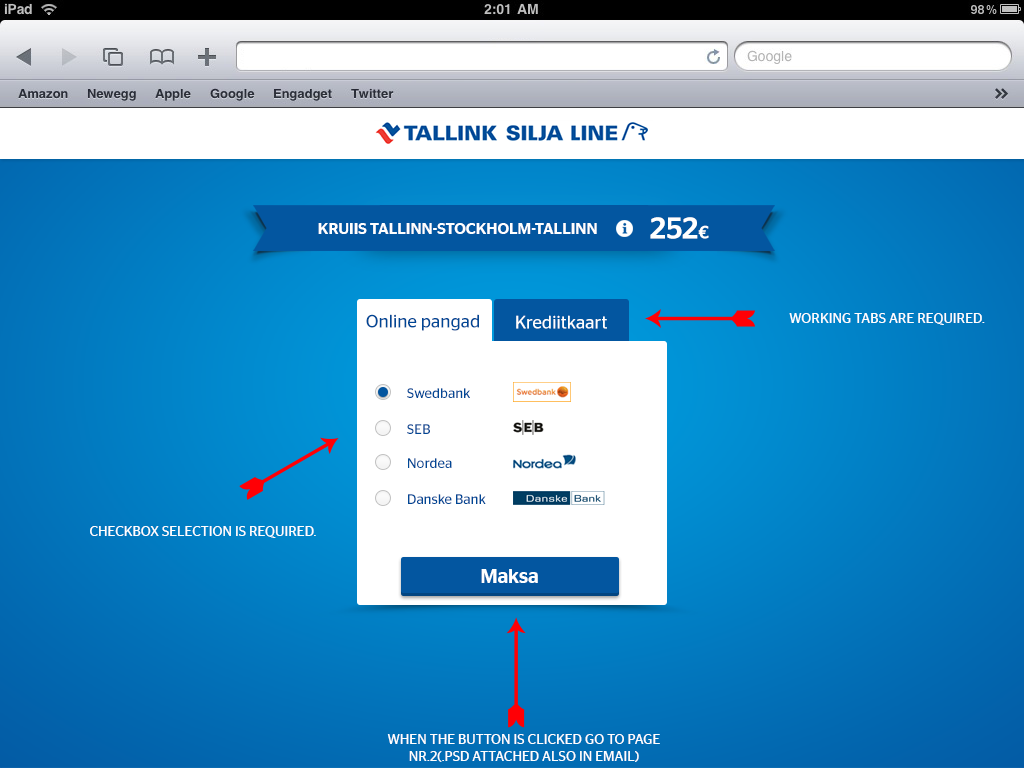
<style>
.page{position:relative;width:1024px;height:768px}
.page>*{position:absolute;margin:0}
.t1{font:30px "StagSans-Medium";color:#ffffff}
.t2{font:18px "StagSans-Medium";color:#ffffff}
.t3{font:16px "StagSans-Medium";color:#ffffff}
.t4{font:18px "StagSans-Book";color:#004795}
.t5{font:18px "StagSans-Book";color:#ffffff}
.t6{font:14px "StagSans-Book";color:#ffffff;text-transform:uppercase}
.t7{font:14px "StagSans-Book";color:#004795}
.t8{font:20px "StagSans-Medium";color:#feffff}
</style>
<div class="page">
<p class="t1" style="left:650px;top:217px;width:59px;height:22px">252<span class="t2">€</span></p>
<p class="t3" style="left:318px;top:223px;width:279px;height:11px">KRUIIS TALLINN-STOCKHOLM-TALLINN</p>
<p class="t4" style="left:366px;top:314px;width:113px;height:17px">Online pangad</p>
<p class="t5" style="left:516px;top:315px;width:91px;height:14px">Krediitkaart</p>
<p class="t6" style="left:789px;top:313px;width:196px;height:12px">wORKING TABS ARE REQUIRED.</p>
<p class="t7" style="left:407px;top:388px;width:63px;height:10px">Swedbank</p>
<p class="t7" style="left:407px;top:424px;width:23px;height:10px">SEB</p>
<p class="t7" style="left:408px;top:458px;width:44px;height:10px">Nordea</p>
<p class="t7" style="left:408px;top:494px;width:78px;height:10px">Danske Bank</p>
<p class="t6" style="left:90px;top:526px;width:226px;height:12px">cHECKBOX SELECTION IS REQUIRED.</p>
<p class="t8" style="left:481px;top:569px;width:57px;height:14px">Maksa</p>
<p class="t6" style="left:387px;top:734px;width:273px;height:28px;text-align:center">wHEN THE BUTTON IS CLICKED GO TO PAGE NR.2(.PSD ATTACHED ALSO IN EMAIL)</p>
</div>
